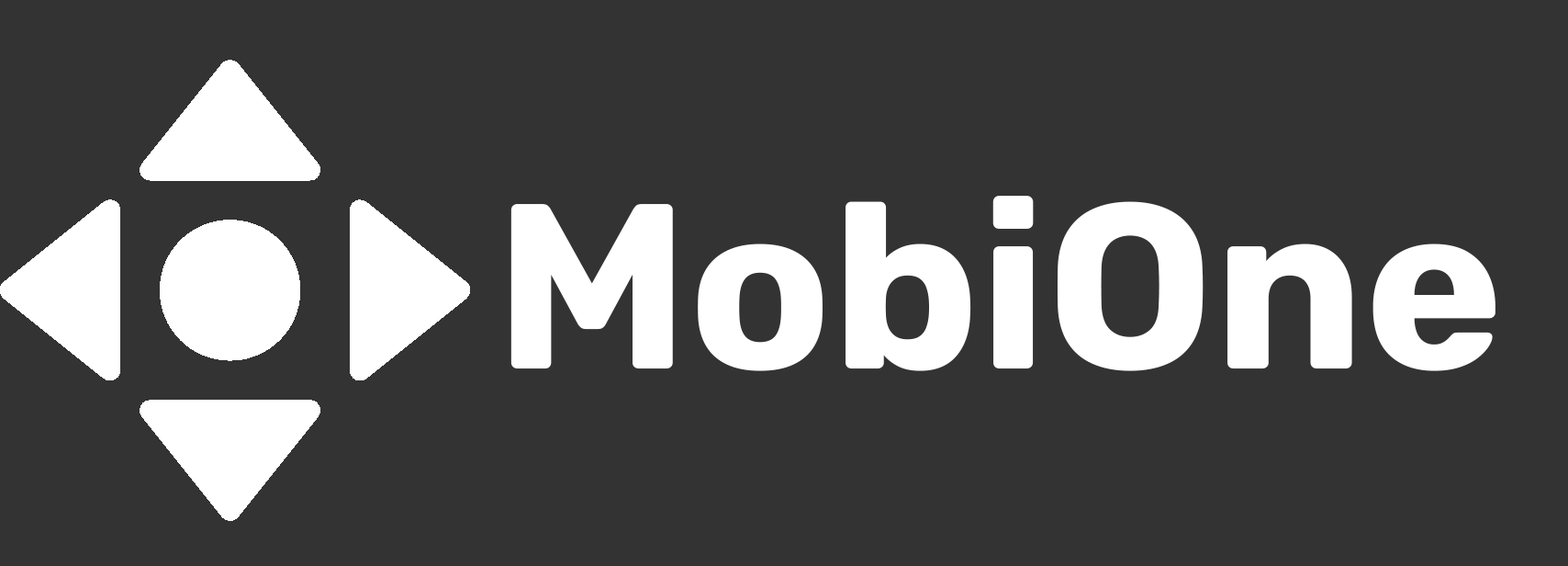
<style>
.page{position:relative;width:1568px;height:566px;background:#333333}
.page>*{position:absolute;margin:0}
.t1{font:234.6px "RubikRoman-Bold";color:#ffffff}
</style>
<div class="page">
<p class="t1" style="left:510px;top:196px;width:985px;height:175px">MobiOne</p>
</div>
